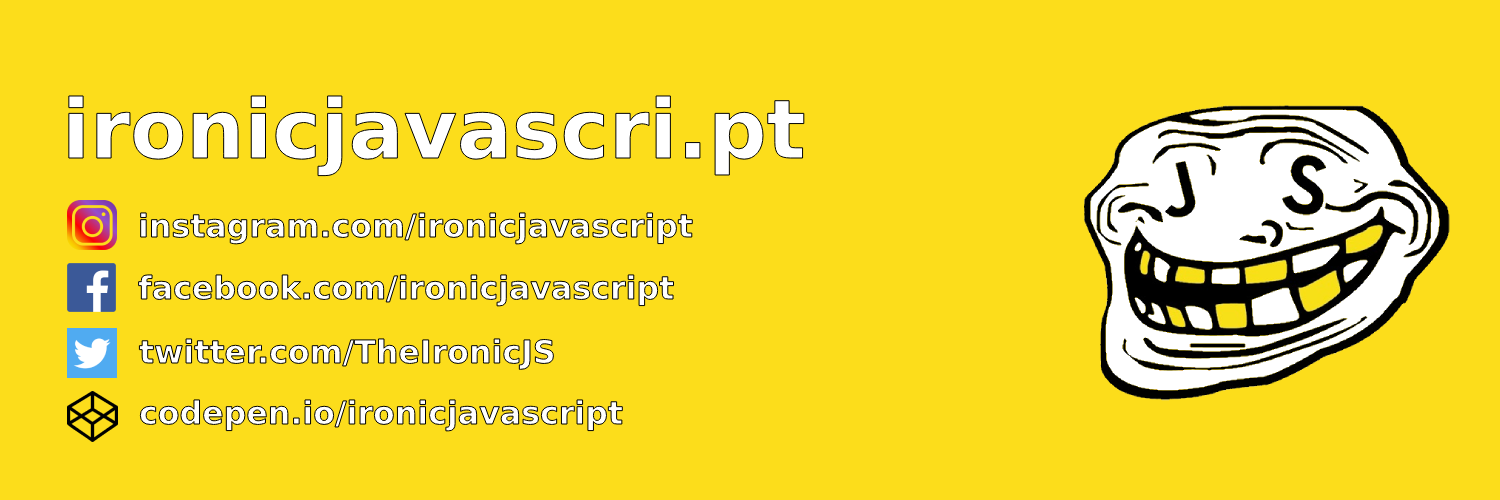
<style>
.page{position:relative;width:1500px;height:500px;background:#fcdd1b}
.page>*{position:absolute;margin:0}
.t1{font:81.6px "DejaVuSans-Bold";color:#ffffff}
.t2{font:31.7px "DejaVuSans-Bold"}
.t3{font:31.7px "DejaVuSans-Bold";color:#ffffff}
</style>
<div class="page">
<p class="t1" style="left:67px;top:94px;width:738px;height:83px">ironicjavascri.pt</p>
<p class="t2" style="left:139px;top:211px;width:555px;height:34px">instagram.com/ironicjavascript</p>
<p class="t3" style="left:137px;top:273px;width:538px;height:34px">facebook.com/ironicjavascript</p>
<p class="t3" style="left:138px;top:337px;width:417px;height:34px">twitter.com/TheIronicJS</p>
<p class="t3" style="left:139px;top:398px;width:485px;height:34px">codepen.io/ironicjavascript</p>
</div>
